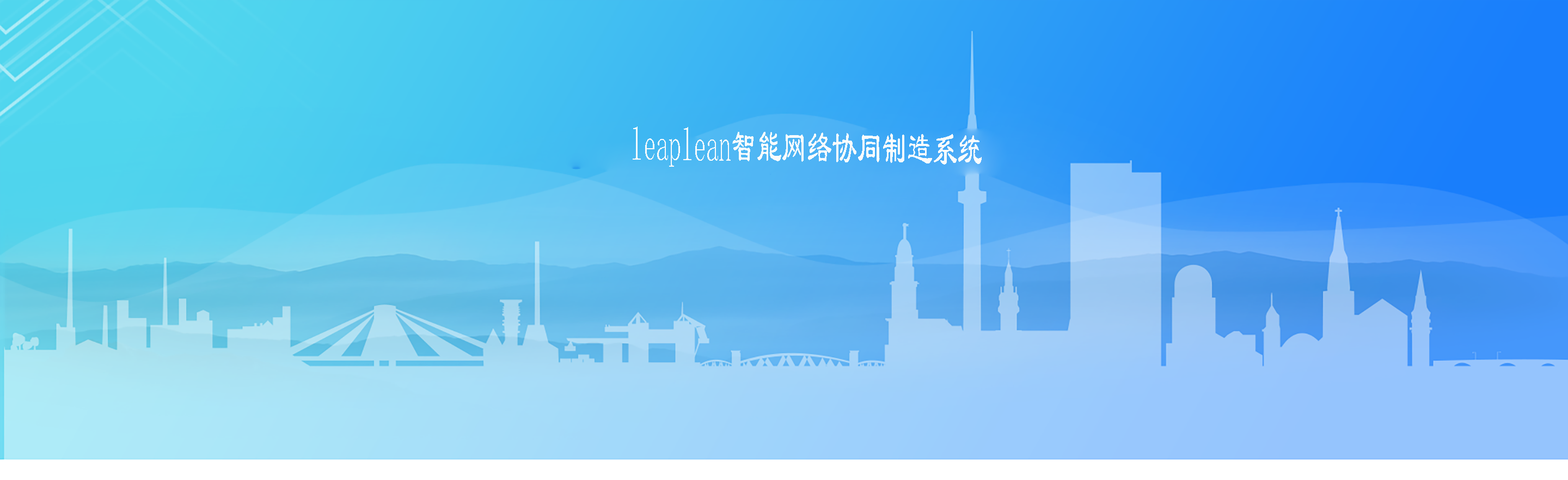
<style>
.page{position:relative;width:1568px;height:480px}
.page>*{position:absolute;margin:0}
.t1{font:47.1px "LiSu";color:#fafbfc;scale:0.53 1}
.t2{font:47.1px "STHupo";color:#fafbfc;scale:0.53 1}
.t3{font:47.1px "SimSun";color:#fafbfc;scale:0.53 1}
</style>
<div class="page">
<p class="t1" style="left:633px;top:126px;width:349px;height:41px;rotate:1deg"><span class="t2">                                                      </span><span class="t3">leaplean</span>智能网络协同制造系统</p>
</div>
